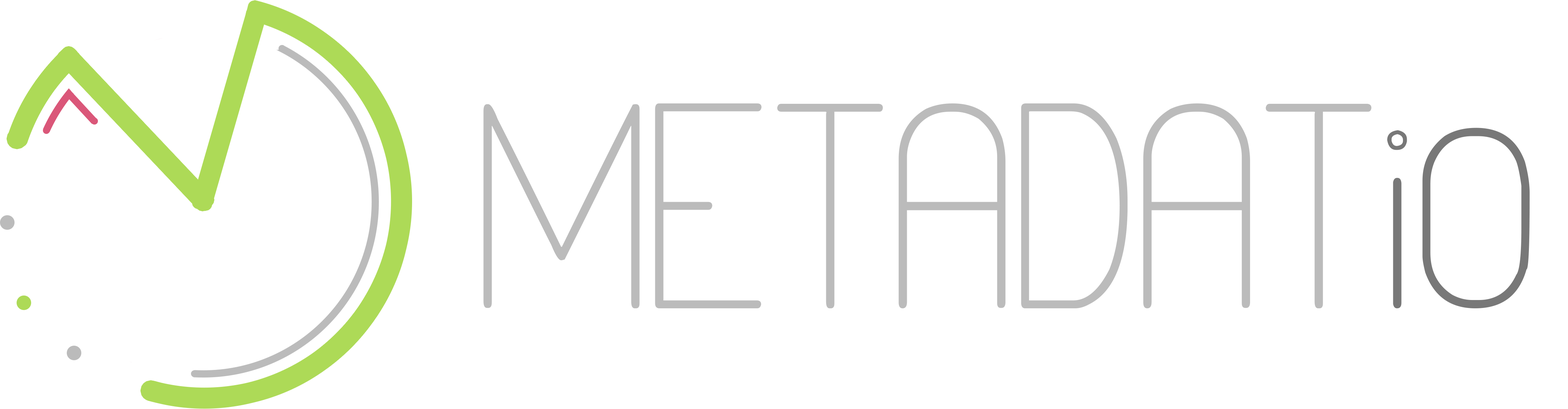
<style>
.page{position:relative;width:1568px;height:409px;background:#ffffff}
.page>*{position:absolute;margin:0}
.t1{font:201.8px "LinealSimplesSt";letter-spacing:-0.02em;color:#bbbbbb}
.t2{font:201.8px "LinealSimplesSt";letter-spacing:-0.02em;color:#787878}
</style>
<div class="page">
<p class="t1" style="left:483px;top:103px;width:1047px;height:205px">METADAT<span class="t2">io</span></p>
</div>
